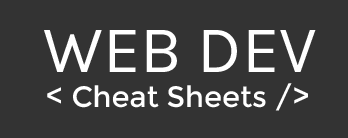
<style>
.page{position:relative;width:348px;height:138px;background:#333333}
.page>*{position:absolute;margin:0}
.t1{font:66.7px "Karla-Regular";color:#ffffff}
.t2{font:29.2px "Montserrat-Regular";color:#ffffff}
</style>
<div class="page">
<p class="t1" style="left:44px;top:30px;width:272px;height:42px">WEB DEV</p>
<p class="t2" style="left:47px;top:83px;width:261px;height:28px">&lt; Cheat Sheets /&gt;</p>
</div>
